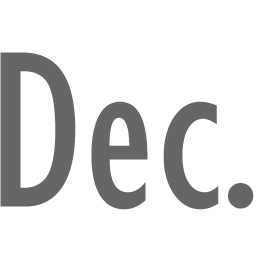
<style>
.page{position:relative;width:280px;height:280px;background:#ffffff}
.page>*{position:absolute;margin:0}
.t1{font:230px "GillSansMT-Condensed";color:#666666}
</style>
<div class="page">
<p class="t1" style="left:0px;top:52px;width:254px;height:158px">Dec.</p>
</div>
